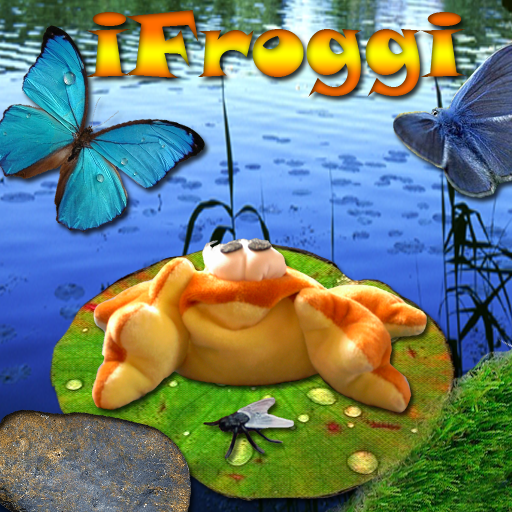
<style>
.page{position:relative;width:512px;height:512px}
.page>*{position:absolute;margin:0}
.t1{font:90px "SnapITC-Regular"}
</style>
<div class="page">
<p class="t1" style="left:85px;top:10px;width:381px;height:87px">iFroggi</p>
</div>
